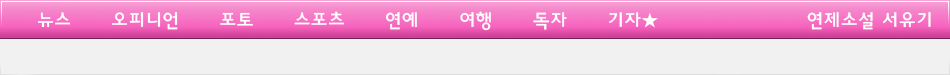
<style>
.page{position:relative;width:950px;height:75px;background:#f1f1f1}
.page>*{position:absolute;margin:0}
.t1{font:19px "HaanYGodic23";color:#ffffff}
</style>
<div class="page">
<p class="t1" style="left:38px;top:11px;width:620px;height:20px">뉴스      오피니언      포토      스포츠      연예      여행      독자      기자★</p>
<p class="t1" style="left:807px;top:12px;width:124px;height:18px">연제소설 서유기</p>
</div>
